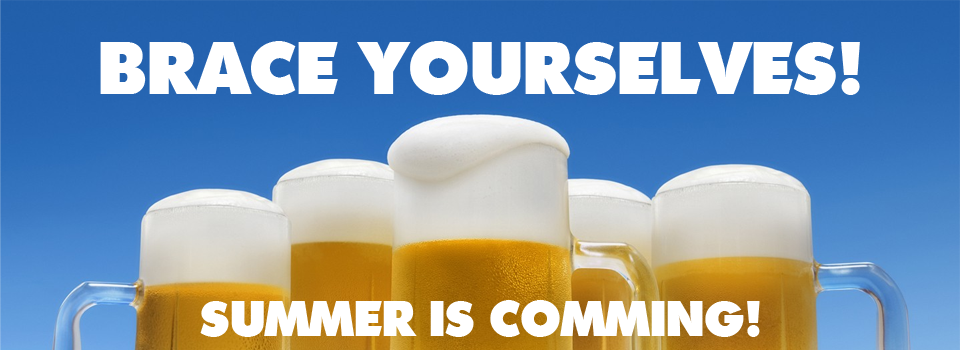
<style>
.page{position:relative;width:960px;height:350px}
.page>*{position:absolute;margin:0}
.t1{font:72px "OpineHeavy";color:#ffffff;text-transform:uppercase}
.t2{font:48px "OpineHeavy";color:#ffffff;text-transform:uppercase}
</style>
<div class="page">
<p class="t1" style="left:100px;top:41px;width:760px;height:54px">brace yourselves!</p>
<p class="t2" style="left:200px;top:300px;width:560px;height:37px">summer is comming!</p>
</div>
